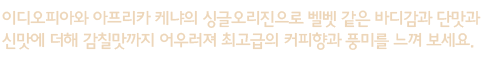
<style>
.page{position:relative;width:488px;height:57px;background:#ffffff}
.page>*{position:absolute;margin:0}
.t1{font:18px "HaanYGodic23";letter-spacing:-0.1em;color:#edd6b9}
</style>
<div class="page">
<p class="t1" style="left:2px;top:10px;width:479px;height:40px">이디오피아와 아프리카 케냐의 싱글오리진으로 벨벳 같은 바디감과 단맛과 <br>신맛에 더해 감칠맛까지 어우러져 최고급의 커피향과 풍미를 느껴 보세요.</p>
</div>
